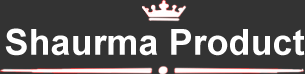
<style>
.page{position:relative;width:305px;height:74px;background:#333333}
.page>*{position:absolute;margin:0}
.t1{font:36px "Arial-BoldMT";color:#ffffff}
</style>
<div class="page">
<p class="t1" style="left:5px;top:28px;width:300px;height:28px">Shaurma Product</p>
</div>
